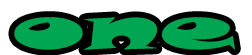
<style>
.page{position:relative;width:252px;height:55px;background:#00a651}
.page>*{position:absolute;margin:0}
.t1{font:60px "SnapITC-Regular";color:#00a651;scale:2 1}
</style>
<div class="page">
<p class="t1" style="left:14px;top:17px;width:221px;height:33px">one</p>
</div>
